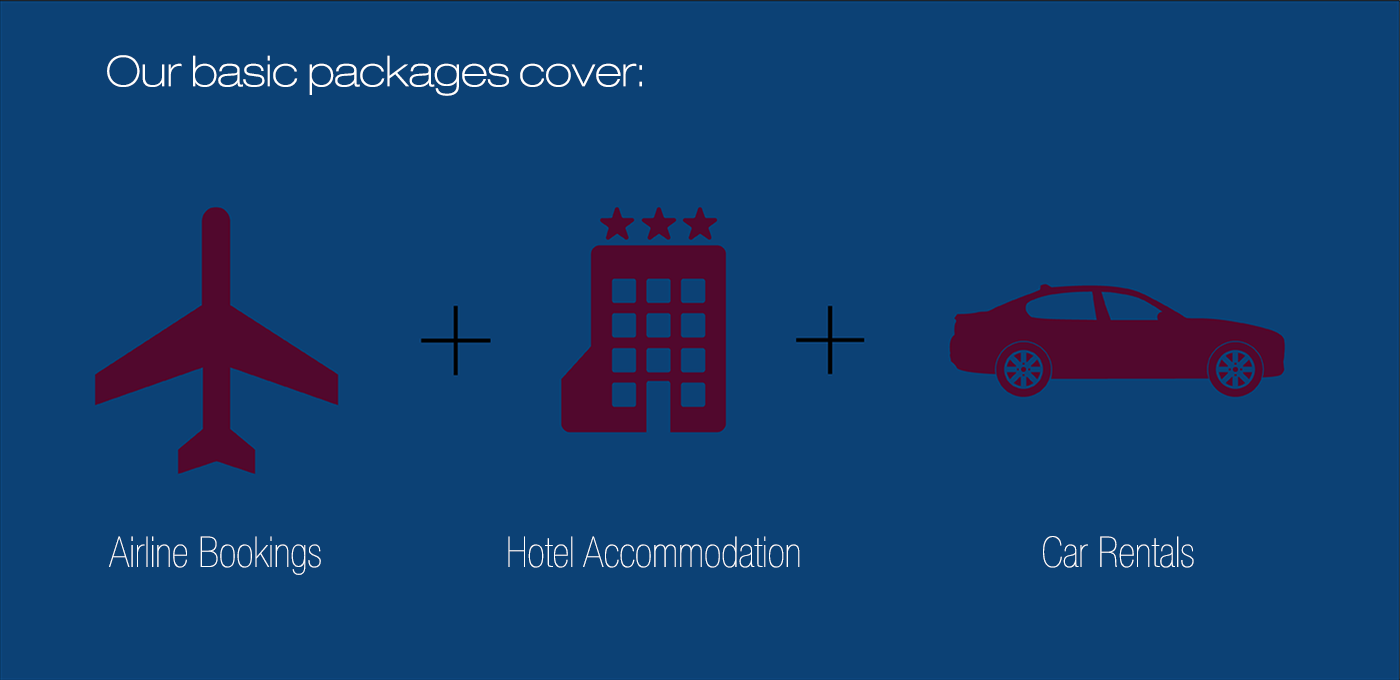
<style>
.page{position:relative;width:1400px;height:680px;background:#0c4175}
.page>*{position:absolute;margin:0}
.t1{font:42.3px "HelveticaNeueLTCom-ThEx";color:#ffffff}
.t2{font:42.4px "HelveticaNeueLTCom-UltLtCn";color:#ffffff}
</style>
<div class="page">
<p class="t1" style="left:107px;top:55px;width:535px;height:41px">Our basic packages cover:</p>
<p class="t2" style="left:109px;top:536px;width:212px;height:39px">Airline Bookings</p>
<p class="t2" style="left:508px;top:536px;width:292px;height:32px">Hotel Accommodation</p>
<p class="t2" style="left:1043px;top:536px;width:151px;height:32px">Car Rentals</p>
</div>
